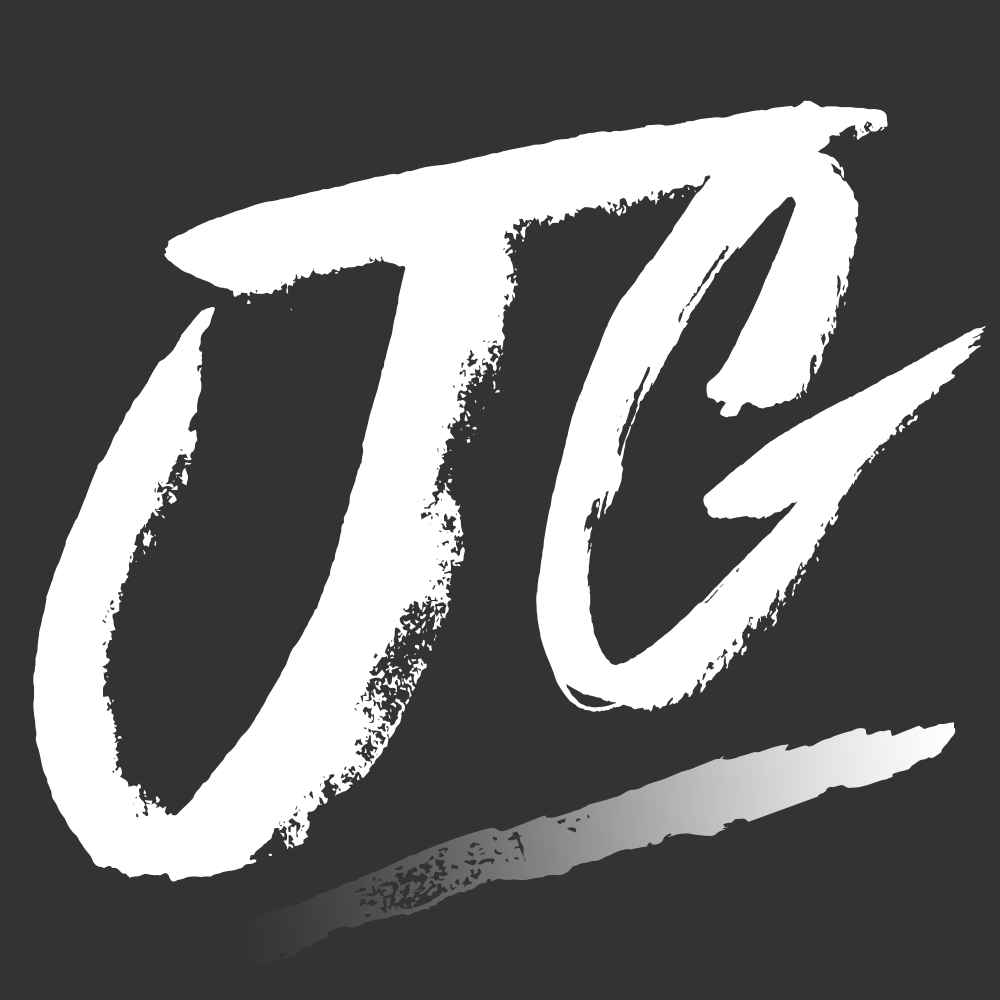
<style>
.page{position:relative;width:1000px;height:1000px;background:#333333}
.page>*{position:absolute;margin:0}
.t1{font:781.3px "Againts";color:#ffffff;scale:0.9 1}
</style>
<div class="page">
<p class="t1" style="left:33px;top:100px;width:953px;height:782px">JG</p>
</div>
